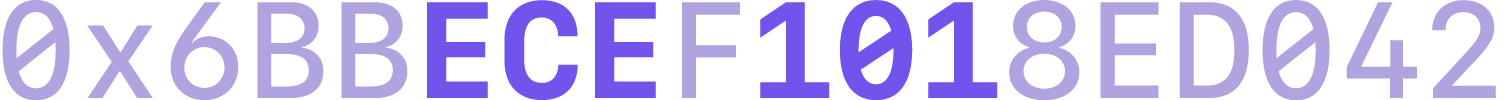
<style>
.page{position:relative;width:1506px;height:100px;background:#ffffff}
.page>*{position:absolute;margin:0}
.t1{font:135.8px "SFMono-Medium";color:#b0a3e0}
.t2{font:135.8px "SFMono-Bold";color:#7253ec}
</style>
<div class="page">
<p class="t1" style="left:2px;top:0px;width:1494px;height:101px">0x6BB<span class="t2">ECE</span>F<span class="t2">101</span>8ED042</p>
</div>
